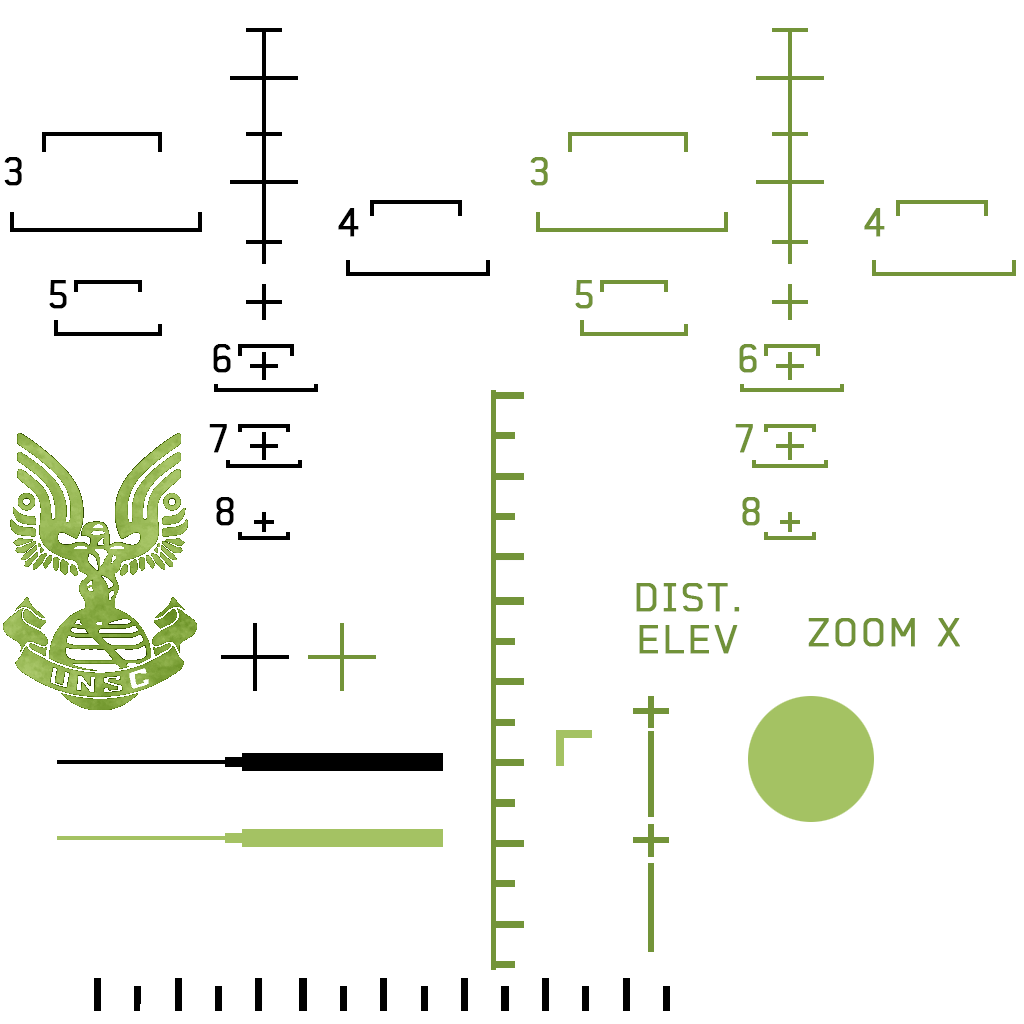
<style>
.page{position:relative;width:1024px;height:1024px;background:#ffffff}
.page>*{position:absolute;margin:0}
.t1{font:39px "Baksheesh";letter-spacing:0.08em;color:#000000;font-weight:bold}
.t2{font:39px "Baksheesh";letter-spacing:0.08em;color:#719239;font-weight:bold}
.t3{font:39px/41.7px "Baksheesh";letter-spacing:0.08em;color:#719239;font-weight:bold}
</style>
<div class="page">
<p class="t1" style="left:4px;top:157px;width:18px;height:29px">3</p>
<p class="t2" style="left:530px;top:157px;width:18px;height:29px">3</p>
<p class="t1" style="left:338px;top:208px;width:21px;height:29px">4</p>
<p class="t2" style="left:864px;top:208px;width:21px;height:29px">4</p>
<p class="t1" style="left:49px;top:280px;width:18px;height:29px">5</p>
<p class="t2" style="left:575px;top:280px;width:18px;height:29px">5</p>
<p class="t1" style="left:213px;top:344px;width:18px;height:29px">6</p>
<p class="t2" style="left:739px;top:344px;width:18px;height:29px">6</p>
<p class="t1" style="left:209px;top:424px;width:18px;height:29px">7</p>
<p class="t2" style="left:735px;top:424px;width:18px;height:29px">7</p>
<p class="t1" style="left:216px;top:497px;width:18px;height:29px">8</p>
<p class="t2" style="left:742px;top:497px;width:18px;height:29px">8</p>
<p class="t3" style="left:636px;top:583px;width:104px;height:71px;text-align:center">DIST.<br>ELEV</p>
<p class="t2" style="left:808px;top:618px;width:152px;height:29px">ZOOM X</p>
</div>
